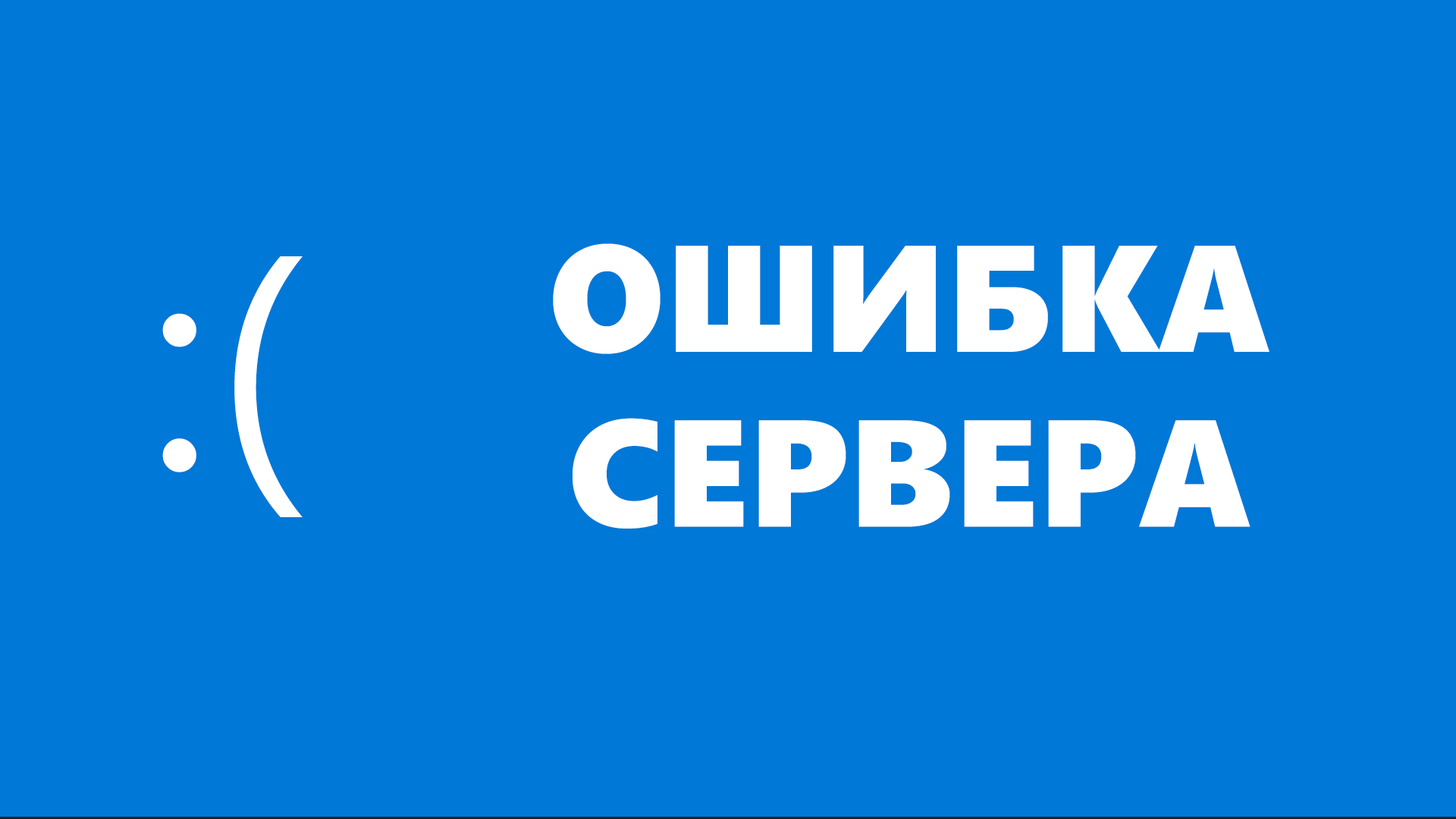
<style>
.page{position:relative;width:1456px;height:819px;background:#0078d7}
.page>*{position:absolute;margin:0}
.t1{font:151.7px/21.8px "SegoeUIBlack";letter-spacing:0.005em;color:#ffffff}
.t2{font:303.3px "SegoeUIHistoric";letter-spacing:0.005em;color:#ffffff}
</style>
<div class="page">
<p class="t1" style="left:553px;top:243px;width:716px;height:286px;text-align:center">ОШИБКА<br><br><br><br><br><br><br><br>СЕРВЕРА</p>
<p class="t2" style="left:162px;top:256px;width:141px;height:261px">:(</p>
</div>
